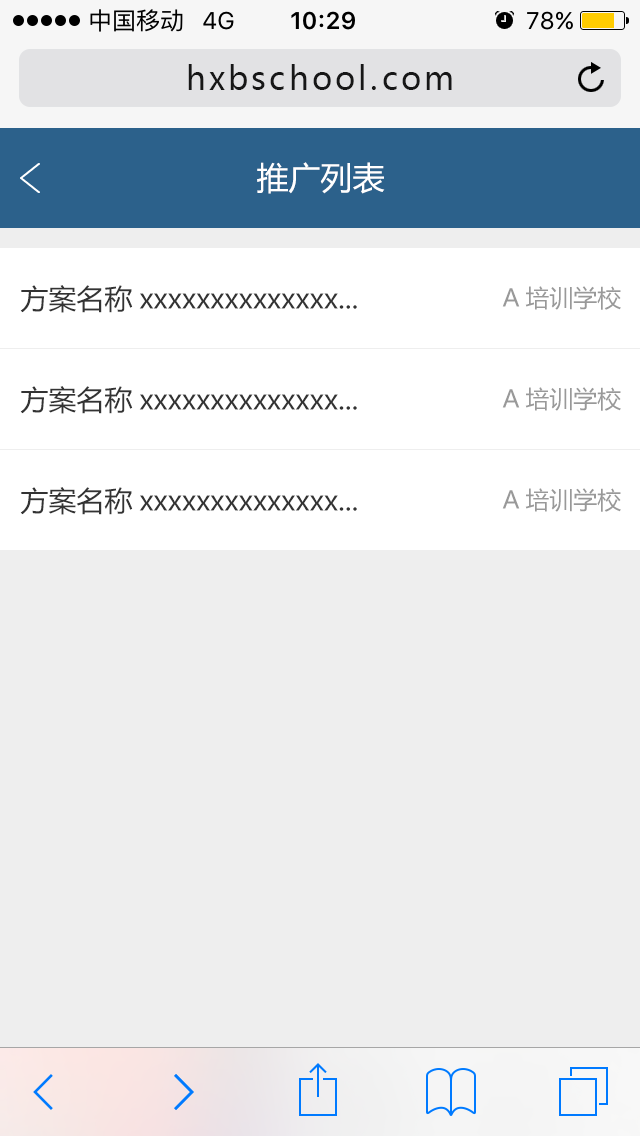
<style>
.page{position:relative;width:640px;height:1136px;background:#eeeeee}
.page>*{position:absolute;margin:0}
.t1{font:32px "MicrosoftYaHei";letter-spacing:0.1em;color:#171717}
.t2{font:32px "MicrosoftYaHei";color:#ffffff}
.t3{font:28px "MicrosoftYaHei";color:#333333}
.t4{font:24px "MicrosoftYaHei";color:#999999}
</style>
<div class="page">
<p class="t1" style="left:188px;top:64px;width:264px;height:26px">hxbschool.com</p>
<p class="t2" style="left:257px;top:162px;width:128px;height:32px">推广列表</p>
<p class="t3" style="left:20px;top:285px;width:337px;height:28px">方案名称xxxxxxxxxxxxxx...</p>
<p class="t4" style="left:502px;top:286px;width:119px;height:24px">A培训学校</p>
<p class="t3" style="left:20px;top:386px;width:337px;height:28px">方案名称xxxxxxxxxxxxxx...</p>
<p class="t4" style="left:502px;top:387px;width:119px;height:24px">A培训学校</p>
<p class="t3" style="left:20px;top:487px;width:337px;height:28px">方案名称xxxxxxxxxxxxxx...</p>
<p class="t4" style="left:502px;top:488px;width:119px;height:24px">A培训学校</p>
</div>
